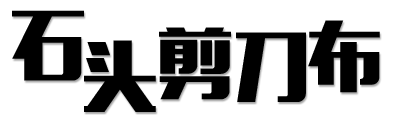
<style>
.page{position:relative;width:393px;height:121px;background:#ffffff}
.page>*{position:absolute;margin:0}
.t1{font:76px "MFLiHei_Noncommercial-Regular";color:#000000}
</style>
<div class="page">
<p class="t1" style="left:12px;top:10px;width:72px;height:71px">石</p>
<p class="t1" style="left:159px;top:27px;width:72px;height:73px">剪</p>
<p class="t1" style="left:308px;top:20px;width:72px;height:73px">布</p>
<p class="t1" style="left:84px;top:40px;width:72px;height:72px">头</p>
<p class="t1" style="left:236px;top:32px;width:70px;height:71px">刀</p>
</div>
